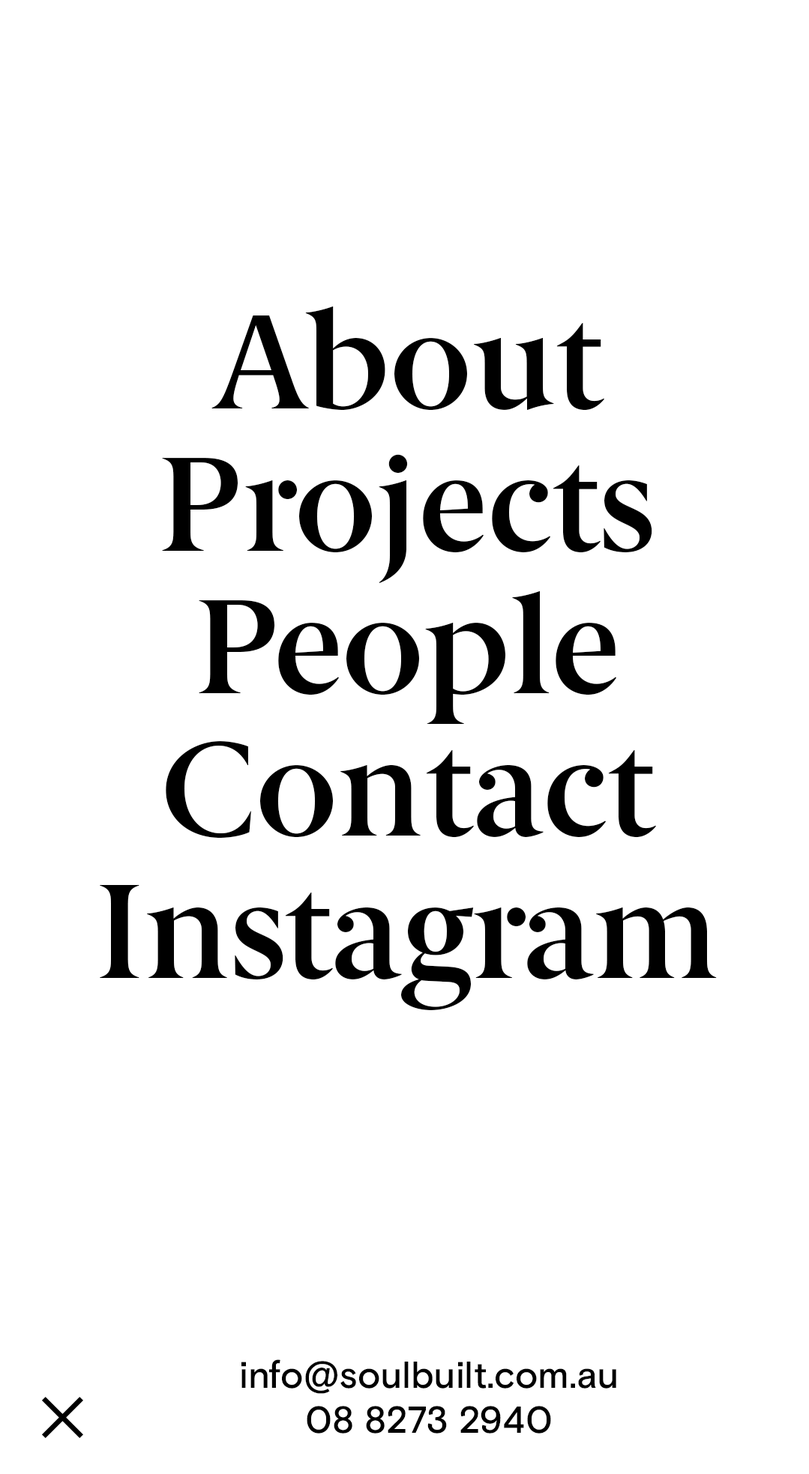
<style>
.page{position:relative;width:809px;height:1474px;background:#ffffff}
.page>*{position:absolute;margin:0}
.t1{font:134.9px "BerlingskeSerif-DemiBold";color:#000000}
.t2{font:134.9px "BerlingskeSerif-DemiBold";letter-spacing:-0.029em;color:#000000}
.t3{font:134.9px "BerlingskeSerif-DemiBold";letter-spacing:-0.019em;color:#000000}
.t4{font:134.9px "BerlingskeSerif-DemiBold";letter-spacing:-0.04em;color:#000000}
.t5{font:134.9px "BerlingskeSerif-DemiBold";letter-spacing:-0.009em;color:#000000}
.t6{font:134.9px "BerlingskeSerif-DemiBold";letter-spacing:-0.002em;color:#000000}
.t7{font:134.9px "BerlingskeSerif-DemiBold";letter-spacing:-0.003em;color:#000000}
.t8{font:134.9px "BerlingskeSerif-DemiBold";letter-spacing:-0.032em;color:#000000}
.t9{font:134.9px "BerlingskeSerif-DemiBold";letter-spacing:-0.022em;color:#000000}
.t10{font:37.5px "BasisGrotesquePro-Medium";color:#000000}
.t11{font:37.5px "BasisGrotesquePro-Medium";letter-spacing:-0.027em;color:#000000}
.t12{font:37.5px "BasisGrotesquePro-Medium";letter-spacing:-0.013em;color:#000000}
.t13{font:37.5px "BasisGrotesquePro-Medium";letter-spacing:-0.005em;color:#000000}
.t14{font:37.5px "BasisGrotesquePro-Medium";letter-spacing:-0.008em;color:#000000}
.t15{font:37.5px "BasisGrotesquePro-Medium";letter-spacing:-0.007em;color:#000000}
.t16{font:37.5px "BasisGrotesquePro-Medium";letter-spacing:-0.006em;color:#000000}
.t17{font:37.5px "BasisGrotesquePro-Medium";letter-spacing:-0.011em;color:#000000}
.t18{font:37.5px "BasisGrotesquePro-Medium";letter-spacing:-0.04em;color:#000000}
.t19{font:37.5px "BasisGrotesquePro-Medium";letter-spacing:-0.038em;color:#000000}
.t20{font:37.5px "BasisGrotesquePro-Medium";letter-spacing:-0.032em;color:#000000}
.t21{font:37.5px "BasisGrotesquePro-Medium";letter-spacing:0.011em;color:#000000}
</style>
<div class="page">
<p class="t1" style="left:211px;top:307px;width:393px;height:104px"><span class="t2">A</span>bout</p>
<p class="t1" style="left:162px;top:454px;width:490px;height:129px">P<span class="t3">r</span>ojects</p>
<p class="t1" style="left:199px;top:591px;width:417px;height:133px"><span class="t4">P</span>eople</p>
<p class="t1" style="left:166px;top:741px;width:490px;height:97px"><span class="t5">C</span>ontact</p>
<p class="t6" style="left:100px;top:885px;width:617px;height:125px"><span class="t7">I</span>n<span class="t8">s</span>tag<span class="t9">r</span>a<span class="t1">m</span></p>
<p class="t10" style="left:241px;top:1360px;width:375px;height:34px">i<span class="t11">n</span><span class="t12">f</span>o@<span class="t13">s</span><span class="t14">o</span>ul<span class="t15">b</span>uilt.<span class="t16">c</span>om.<span class="t17">a</span>u</p>
<p class="t10" style="left:307px;top:1406px;width:244px;height:28px">08 8<span class="t18">2</span><span class="t19">7</span>3 <span class="t20">2</span>9<span class="t21">4</span>0</p>
</div>
